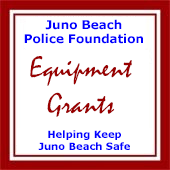
<style>
.page{position:relative;width:170px;height:170px;background:#ffffff}
.page>*{position:absolute;margin:0}
.t1{font:12px "Verdana-Bold";color:#0000ff}
.t2{font:30px "Mistral";color:#990000}
.t3{font:10px "Verdana-Bold";color:#0000ff}
</style>
<div class="page">
<p class="t1" style="left:24px;top:19px;width:119px;height:25px;text-align:center">Juno Beach<br>Police Foundation</p>
<p class="t2" style="left:30px;top:56px;width:102px;height:61px;text-align:center">Equipment<br>Grants</p>
<p class="t3" style="left:38px;top:130px;width:92px;height:20px;text-align:center">Helping Keep<br>Juno Beach Safe</p>
</div>
